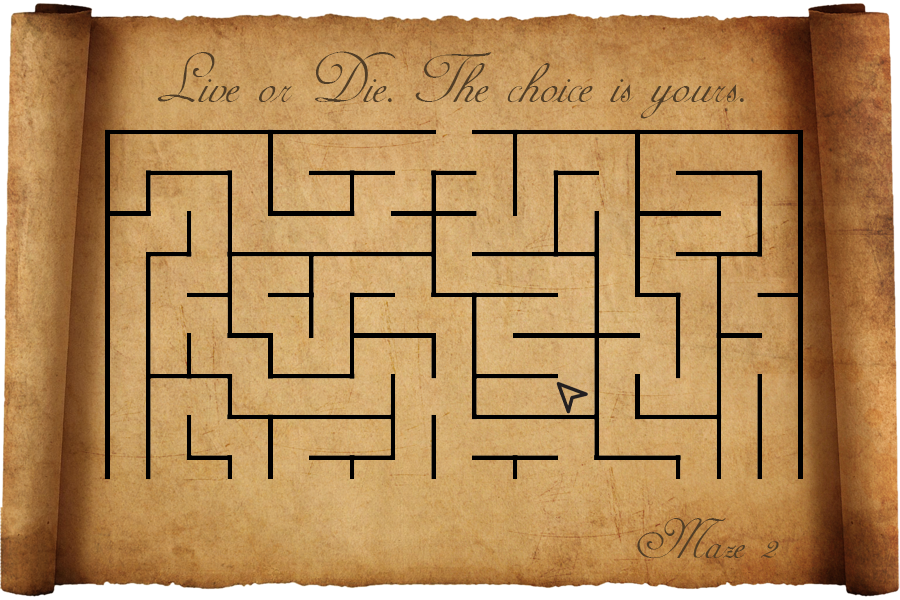
<style>
.page{position:relative;width:900px;height:600px}
.page>*{position:absolute;margin:0}
.t1{font:80px "AdineKirnberg-Script";color:#513e27}
.t2{font:64px "AdineKirnberg-Script";color:#513e27}
</style>
<div class="page">
<p class="t1" style="left:157px;top:51px;width:587px;height:68px">Live or Die. The choice is yours.</p>
<p class="t2" style="left:637px;top:518px;width:142px;height:40px">Maze 2</p>
</div>
